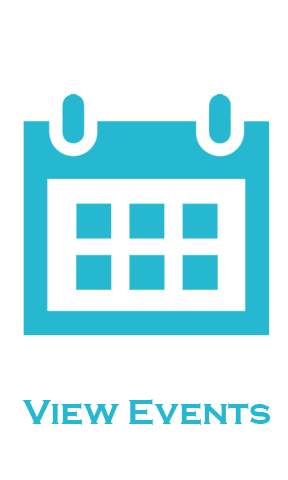
<style>
.page{position:relative;width:288px;height:480px;background:#ffffff}
.page>*{position:absolute;margin:0}
.t1{font:36px "CopperplateGothic-Bold";color:#27b8d1}
</style>
<div class="page">
<p class="t1" style="left:22px;top:399px;width:248px;height:26px">View Events</p>
</div>
